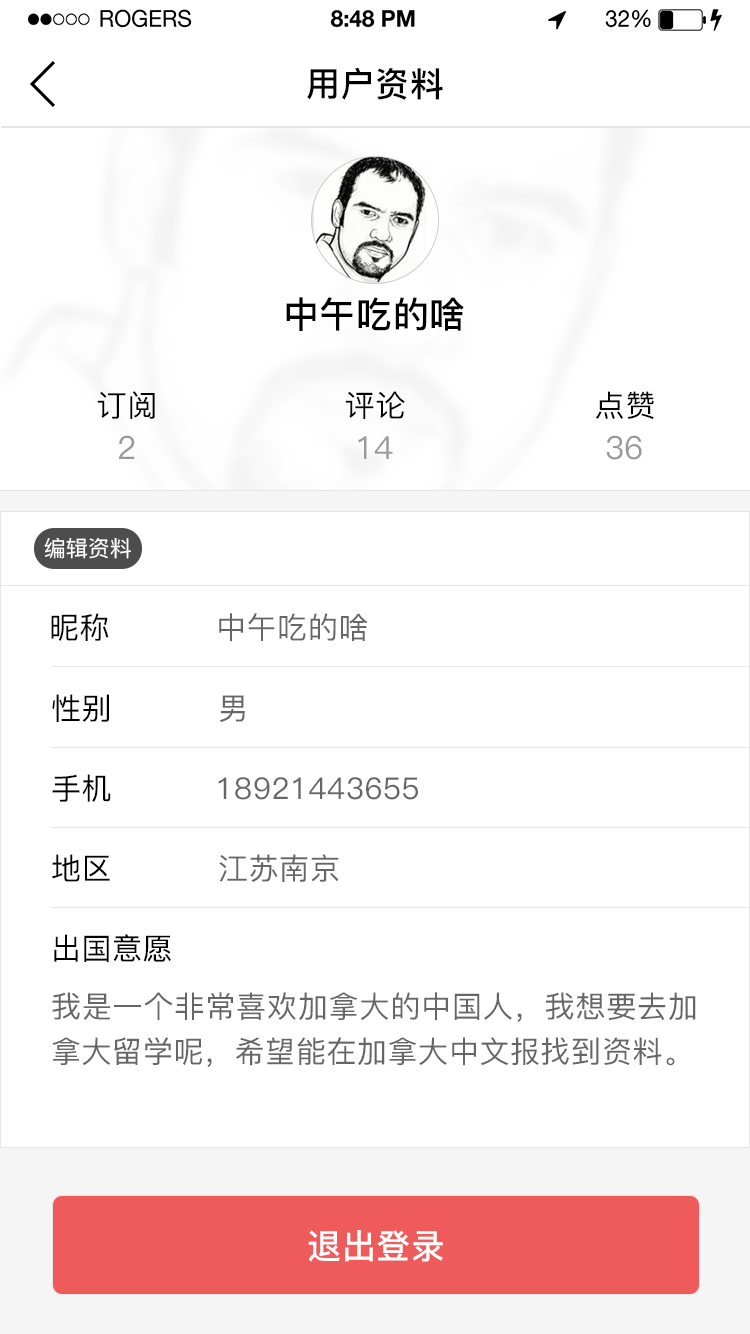
<style>
.page{position:relative;width:750px;height:1334px;background:#ffffff}
.page>*{position:absolute;margin:0}
.t1{font:34px "PingFang-SC-Bold";letter-spacing:0.02em;color:#000000}
.t2{font:36px "PingFang-SC-Bold";letter-spacing:0.02em;color:#000000}
.t3{font:30px "PingFang-SC-Medium";letter-spacing:0.02em;color:#000000}
.t4{font:32px "PingFang-SC-Medium";letter-spacing:0.02em;color:#999999}
.t5{font:22px "PingFang-SC-Medium";color:#ffffff}
.t6{font:30px "PingFang-SC-Medium";letter-spacing:0.02em;color:#666666}
.t7{font:30px/45px "PingFang-SC-Medium";letter-spacing:0.02em;color:#666666}
.t8{font:34px "PingFang-SC-Bold";letter-spacing:0.02em;color:#ffffff}
</style>
<div class="page">
<p class="t1" style="left:307px;top:67px;width:136px;height:33px">用户资料</p>
<p class="t2" style="left:286px;top:297px;width:178px;height:34px">中午吃的啥</p>
<p class="t3" style="left:97px;top:391px;width:58px;height:28px">订阅</p>
<p class="t3" style="left:345px;top:391px;width:60px;height:28px">评论</p>
<p class="t3" style="left:595px;top:391px;width:59px;height:28px">点赞</p>
<p class="t4" style="left:119px;top:435px;width:16px;height:24px">2</p>
<p class="t4" style="left:358px;top:436px;width:35px;height:23px">14</p>
<p class="t4" style="left:606px;top:435px;width:36px;height:25px">36</p>
<p class="t5" style="left:44px;top:537px;width:87px;height:22px">编辑资料</p>
<p class="t6" style="left:51px;top:613px;width:317px;height:29px"><span class="t3">昵称          </span>中午吃的啥</p>
<p class="t3" style="left:52px;top:694px;width:193px;height:28px">性别          <span class="t6">男</span></p>
<p class="t6" style="left:52px;top:774px;width:366px;height:28px"><span class="t3">手机          </span>18921443655</p>
<p class="t6" style="left:52px;top:854px;width:287px;height:28px"><span class="t3">地区          </span>江苏南京</p>
<p class="t3" style="left:54px;top:934px;width:117px;height:28px">出国意愿</p>
<p class="t7" style="left:52px;top:992px;width:644px;height:75px;text-align:justify">我是一个非常喜欢加拿大的中国人，我想要去加拿大留学呢，希望能在加拿大中文报找到资料。</p>
<p class="t8" style="left:308px;top:1230px;width:135px;height:32px">退出登录</p>
</div>
